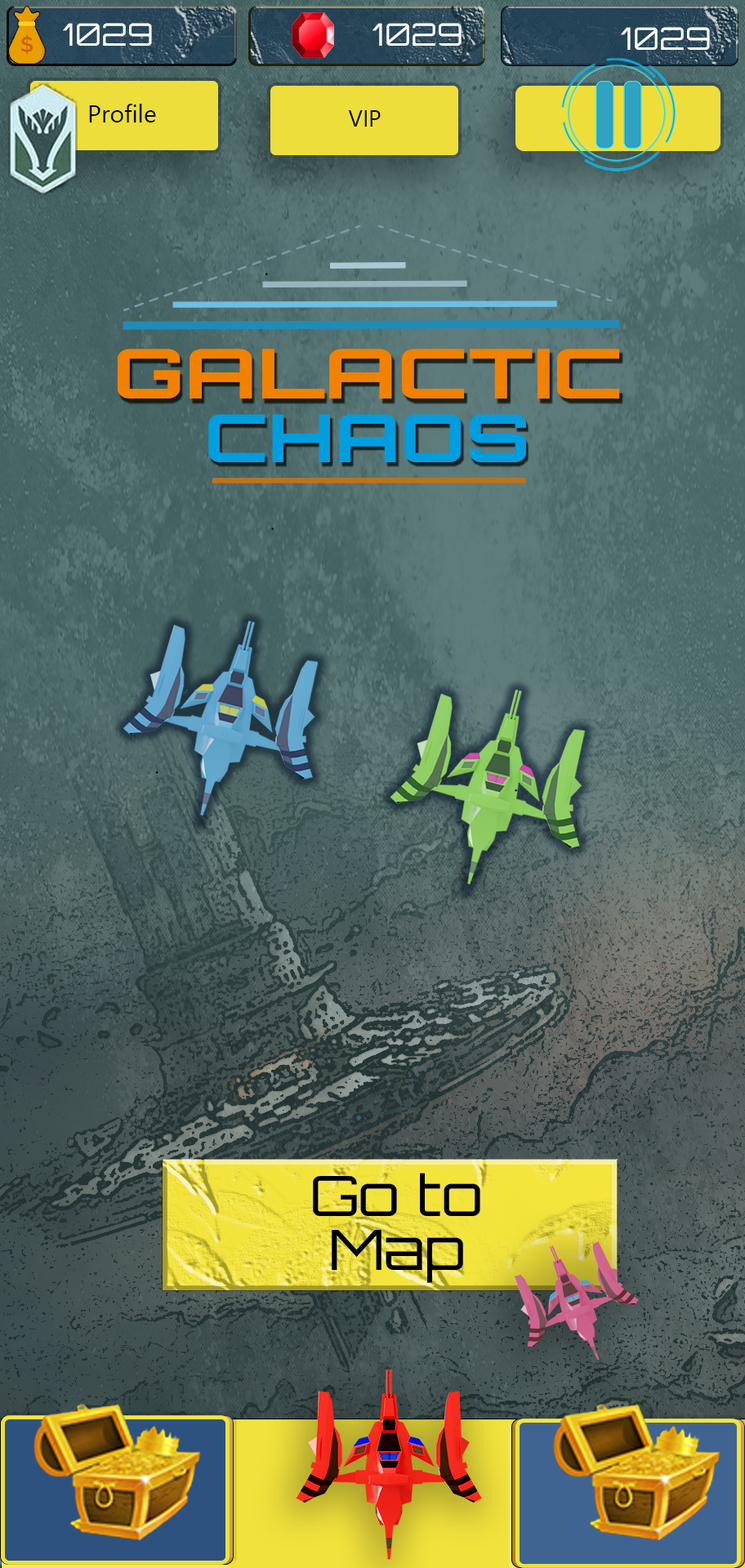
<style>
.page{position:relative;width:745px;height:1568px}
.page>*{position:absolute;margin:0}
.t1{font:31px "Orbitron-Black";color:#ffffff}
.t2{font:24.5px "SegoeUI";color:#000000}
.t3{font:22.9px "SegoeUI";color:#000000}
</style>
<div class="page">
<p class="t1" style="left:63px;top:23px;width:89px;height:23px">1029</p>
<p class="t1" style="left:372px;top:23px;width:89px;height:23px">1029</p>
<p class="t1" style="left:621px;top:27px;width:89px;height:23px">1029</p>
<p class="t2" style="left:89px;top:104px;width:67px;height:18px">Profile</p>
<p class="t3" style="left:348px;top:110px;width:33px;height:17px">VIP</p>
</div>
